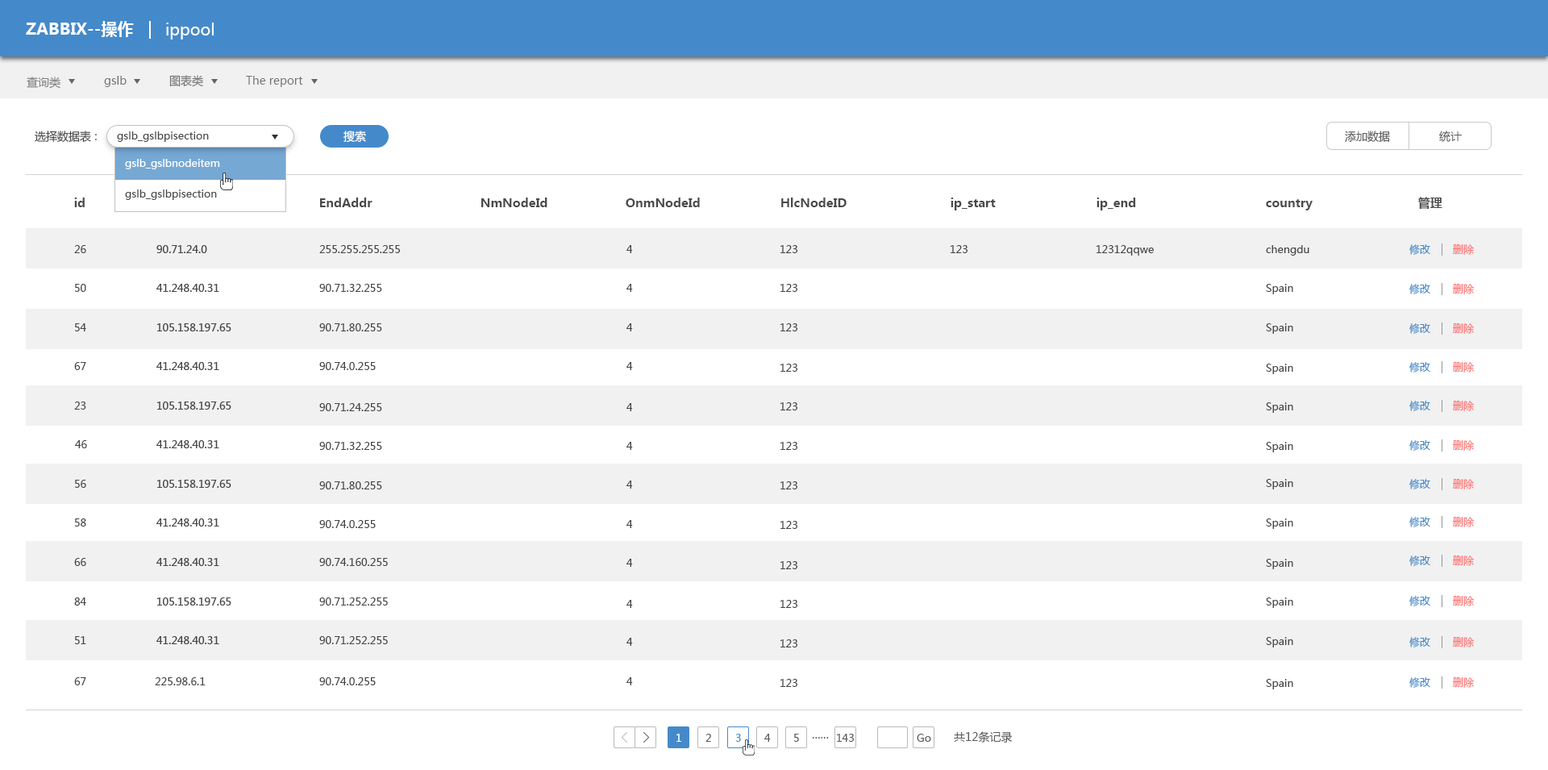
<style>
.page{position:relative;width:1548px;height:770px;background:#ffffff}
.page>*{position:absolute;margin:0}
.t1{font:16.1px "MicrosoftYaHei-Bold";color:#ffffff}
.t2{font:16.1px "MicrosoftYaHei";color:#ffffff}
.t3{font:11.3px "MicrosoftYaHei";color:#828282}
.t4{font:11.3px "MicrosoftYaHei";color:#747474}
.t5{font:11.3px "MicrosoftYaHei";color:#4a4a4a}
.t6{font:10.5px "MicrosoftYaHei";color:#4a4a4a}
.t7{font:11.3px "MicrosoftYaHei";color:#ffffff}
.t8{font:11.3px "MicrosoftYaHei";color:#5c5c5c}
.t9{font:10.5px "MicrosoftYaHei";color:#ffffff}
.t10{font:12.1px "MicrosoftYaHei-Bold";color:#4a4a4a}
.t11{font:10.5px "MicrosoftYaHei";color:#464646}
.t12{font:10.5px "MicrosoftYaHei";color:#448aca}
.t13{font:10.5px "MicrosoftYaHei";color:#fe7878}
.t14{font:10.5px "MicrosoftYaHei";color:#5b5b5b}
.t15{font:11.3px "MicrosoftYaHei";color:#5b5b5b}
</style>
<div class="page">
<p class="t1" style="left:26px;top:21px;width:108px;height:16px">ZABBIX--操作</p>
<p class="t2" style="left:166px;top:23px;width:48px;height:17px">ippool</p>
<p class="t3" style="left:27px;top:77px;width:33px;height:12px">查询类</p>
<p class="t4" style="left:104px;top:76px;width:23px;height:11px">gslb</p>
<p class="t4" style="left:169px;top:75px;width:34px;height:12px">图表类</p>
<p class="t4" style="left:246px;top:76px;width:57px;height:11px">The report</p>
<p class="t5" style="left:35px;top:131px;width:62px;height:12px">选择数据表 :</p>
<p class="t6" style="left:117px;top:131px;width:92px;height:11px">gslb_gslbpisection</p>
<p class="t7" style="left:344px;top:131px;width:22px;height:12px">搜索</p>
<p class="t8" style="left:1345px;top:131px;width:45px;height:12px">添加数据</p>
<p class="t8" style="left:1439px;top:131px;width:23px;height:11px">统计</p>
<p class="t9" style="left:125px;top:159px;width:95px;height:10px">gslb_gslbnodeitem</p>
<p class="t10" style="left:74px;top:198px;width:11px;height:9px">id</p>
<p class="t6" style="left:125px;top:190px;width:92px;height:10px">gslb_gslbpisection</p>
<p class="t10" style="left:320px;top:198px;width:53px;height:9px">EndAddr</p>
<p class="t10" style="left:481px;top:198px;width:67px;height:9px">NmNodeId</p>
<p class="t10" style="left:626px;top:198px;width:74px;height:9px">OnmNodeId</p>
<p class="t10" style="left:781px;top:198px;width:66px;height:9px">HlcNodeID</p>
<p class="t10" style="left:951px;top:198px;width:45px;height:12px">ip_start</p>
<p class="t10" style="left:1097px;top:198px;width:39px;height:12px">ip_end</p>
<p class="t10" style="left:1419px;top:197px;width:24px;height:12px">管理</p>
<p class="t10" style="left:1266px;top:199px;width:47px;height:11px">country</p>
<p class="t11" style="left:74px;top:245px;width:12px;height:8px">26</p>
<p class="t11" style="left:319px;top:245px;width:81px;height:8px">255.255.255.255</p>
<p class="t11" style="left:627px;top:245px;width:6px;height:8px">4</p>
<p class="t11" style="left:781px;top:245px;width:17px;height:8px">123</p>
<p class="t11" style="left:951px;top:245px;width:17px;height:8px">123</p>
<p class="t11" style="left:1097px;top:245px;width:57px;height:11px">12312qqwe</p>
<p class="t11" style="left:1266px;top:245px;width:44px;height:11px">chengdu</p>
<p class="t12" style="left:1410px;top:244px;width:21px;height:11px">修改</p>
<p class="t13" style="left:1453px;top:244px;width:21px;height:11px">删除</p>
<p class="t11" style="left:75px;top:284px;width:11px;height:8px">50</p>
<p class="t11" style="left:319px;top:284px;width:63px;height:8px">90.71.32.255</p>
<p class="t11" style="left:627px;top:284px;width:6px;height:8px">4</p>
<p class="t11" style="left:781px;top:284px;width:17px;height:8px">123</p>
<p class="t11" style="left:1266px;top:284px;width:28px;height:10px">Spain</p>
<p class="t12" style="left:1410px;top:284px;width:21px;height:10px">修改</p>
<p class="t13" style="left:1453px;top:284px;width:21px;height:10px">删除</p>
<p class="t11" style="left:75px;top:323px;width:11px;height:8px">54</p>
<p class="t11" style="left:319px;top:323px;width:63px;height:8px">90.71.80.255</p>
<p class="t11" style="left:627px;top:323px;width:6px;height:8px">4</p>
<p class="t11" style="left:781px;top:323px;width:17px;height:8px">123</p>
<p class="t11" style="left:1266px;top:323px;width:28px;height:11px">Spain</p>
<p class="t12" style="left:1410px;top:323px;width:21px;height:11px">修改</p>
<p class="t13" style="left:1453px;top:323px;width:21px;height:11px">删除</p>
<p class="t11" style="left:74px;top:362px;width:12px;height:8px">67</p>
<p class="t11" style="left:319px;top:362px;width:57px;height:8px">90.74.0.255</p>
<p class="t11" style="left:627px;top:362px;width:6px;height:8px">4</p>
<p class="t11" style="left:781px;top:364px;width:17px;height:8px">123</p>
<p class="t11" style="left:1266px;top:364px;width:28px;height:10px">Spain</p>
<p class="t12" style="left:1410px;top:362px;width:21px;height:11px">修改</p>
<p class="t13" style="left:1453px;top:362px;width:21px;height:11px">删除</p>
<p class="t11" style="left:74px;top:402px;width:12px;height:8px">23</p>
<p class="t12" style="left:1410px;top:401px;width:21px;height:10px">修改</p>
<p class="t13" style="left:1453px;top:401px;width:21px;height:10px">删除</p>
<p class="t11" style="left:319px;top:403px;width:63px;height:8px">90.71.24.255</p>
<p class="t11" style="left:627px;top:403px;width:6px;height:8px">4</p>
<p class="t11" style="left:781px;top:402px;width:17px;height:8px">123</p>
<p class="t11" style="left:1266px;top:402px;width:28px;height:11px">Spain</p>
<p class="t11" style="left:75px;top:440px;width:12px;height:8px">46</p>
<p class="t11" style="left:319px;top:442px;width:63px;height:8px">90.71.32.255</p>
<p class="t11" style="left:627px;top:442px;width:6px;height:8px">4</p>
<p class="t11" style="left:781px;top:442px;width:17px;height:8px">123</p>
<p class="t11" style="left:1266px;top:442px;width:28px;height:10px">Spain</p>
<p class="t12" style="left:1410px;top:440px;width:21px;height:11px">修改</p>
<p class="t13" style="left:1453px;top:440px;width:21px;height:11px">删除</p>
<p class="t11" style="left:75px;top:480px;width:11px;height:8px">56</p>
<p class="t11" style="left:319px;top:481px;width:63px;height:9px">90.71.80.255</p>
<p class="t11" style="left:627px;top:481px;width:6px;height:8px">4</p>
<p class="t11" style="left:781px;top:481px;width:17px;height:9px">123</p>
<p class="t11" style="left:1266px;top:479px;width:28px;height:11px">Spain</p>
<p class="t12" style="left:1410px;top:479px;width:21px;height:11px">修改</p>
<p class="t13" style="left:1453px;top:479px;width:21px;height:11px">删除</p>
<p class="t11" style="left:75px;top:519px;width:11px;height:8px">58</p>
<p class="t11" style="left:319px;top:520px;width:57px;height:8px">90.74.0.255</p>
<p class="t11" style="left:627px;top:520px;width:6px;height:8px">4</p>
<p class="t11" style="left:781px;top:521px;width:17px;height:8px">123</p>
<p class="t11" style="left:1266px;top:519px;width:28px;height:10px">Spain</p>
<p class="t12" style="left:1410px;top:517px;width:21px;height:10px">修改</p>
<p class="t13" style="left:1453px;top:517px;width:21px;height:10px">删除</p>
<p class="t12" style="left:1410px;top:556px;width:21px;height:10px">修改</p>
<p class="t13" style="left:1453px;top:556px;width:21px;height:10px">删除</p>
<p class="t11" style="left:74px;top:558px;width:12px;height:8px">66</p>
<p class="t11" style="left:319px;top:558px;width:69px;height:8px">90.74.160.255</p>
<p class="t11" style="left:627px;top:559px;width:6px;height:8px">4</p>
<p class="t11" style="left:781px;top:561px;width:17px;height:8px">123</p>
<p class="t11" style="left:1266px;top:559px;width:28px;height:10px">Spain</p>
<p class="t11" style="left:74px;top:598px;width:12px;height:8px">84</p>
<p class="t11" style="left:319px;top:598px;width:69px;height:8px">90.71.252.255</p>
<p class="t11" style="left:627px;top:600px;width:6px;height:8px">4</p>
<p class="t11" style="left:781px;top:600px;width:17px;height:8px">123</p>
<p class="t11" style="left:1266px;top:598px;width:28px;height:10px">Spain</p>
<p class="t12" style="left:1410px;top:596px;width:21px;height:10px">修改</p>
<p class="t13" style="left:1453px;top:596px;width:21px;height:10px">删除</p>
<p class="t11" style="left:75px;top:636px;width:11px;height:8px">51</p>
<p class="t11" style="left:319px;top:636px;width:69px;height:8px">90.71.252.255</p>
<p class="t11" style="left:627px;top:638px;width:6px;height:8px">4</p>
<p class="t11" style="left:781px;top:639px;width:17px;height:9px">123</p>
<p class="t11" style="left:1266px;top:637px;width:28px;height:11px">Spain</p>
<p class="t12" style="left:1410px;top:637px;width:21px;height:11px">修改</p>
<p class="t13" style="left:1453px;top:637px;width:21px;height:11px">删除</p>
<p class="t11" style="left:74px;top:677px;width:12px;height:8px">67</p>
<p class="t11" style="left:155px;top:677px;width:51px;height:8px">225.98.6.1</p>
<p class="t11" style="left:319px;top:677px;width:57px;height:8px">90.74.0.255</p>
<p class="t11" style="left:627px;top:677px;width:6px;height:8px">4</p>
<p class="t12" style="left:1410px;top:677px;width:21px;height:11px">修改</p>
<p class="t13" style="left:1453px;top:677px;width:21px;height:11px">删除</p>
<p class="t11" style="left:781px;top:679px;width:17px;height:8px">123</p>
<p class="t11" style="left:1266px;top:679px;width:28px;height:10px">Spain</p>
<p class="t9" style="left:677px;top:734px;width:4px;height:8px">1</p>
<p class="t14" style="left:706px;top:734px;width:5px;height:8px">2</p>
<p class="t12" style="left:735px;top:734px;width:6px;height:8px">3</p>
<p class="t14" style="left:764px;top:734px;width:7px;height:8px">4</p>
<p class="t14" style="left:794px;top:734px;width:5px;height:8px">5</p>
<p class="t14" style="left:812px;top:737px;width:17px;height:2px">……</p>
<p class="t14" style="left:837px;top:734px;width:17px;height:8px">143</p>
<p class="t14" style="left:917px;top:734px;width:14px;height:8px">Go</p>
<p class="t15" style="left:954px;top:731px;width:59px;height:12px">共12条记录</p>
</div>
